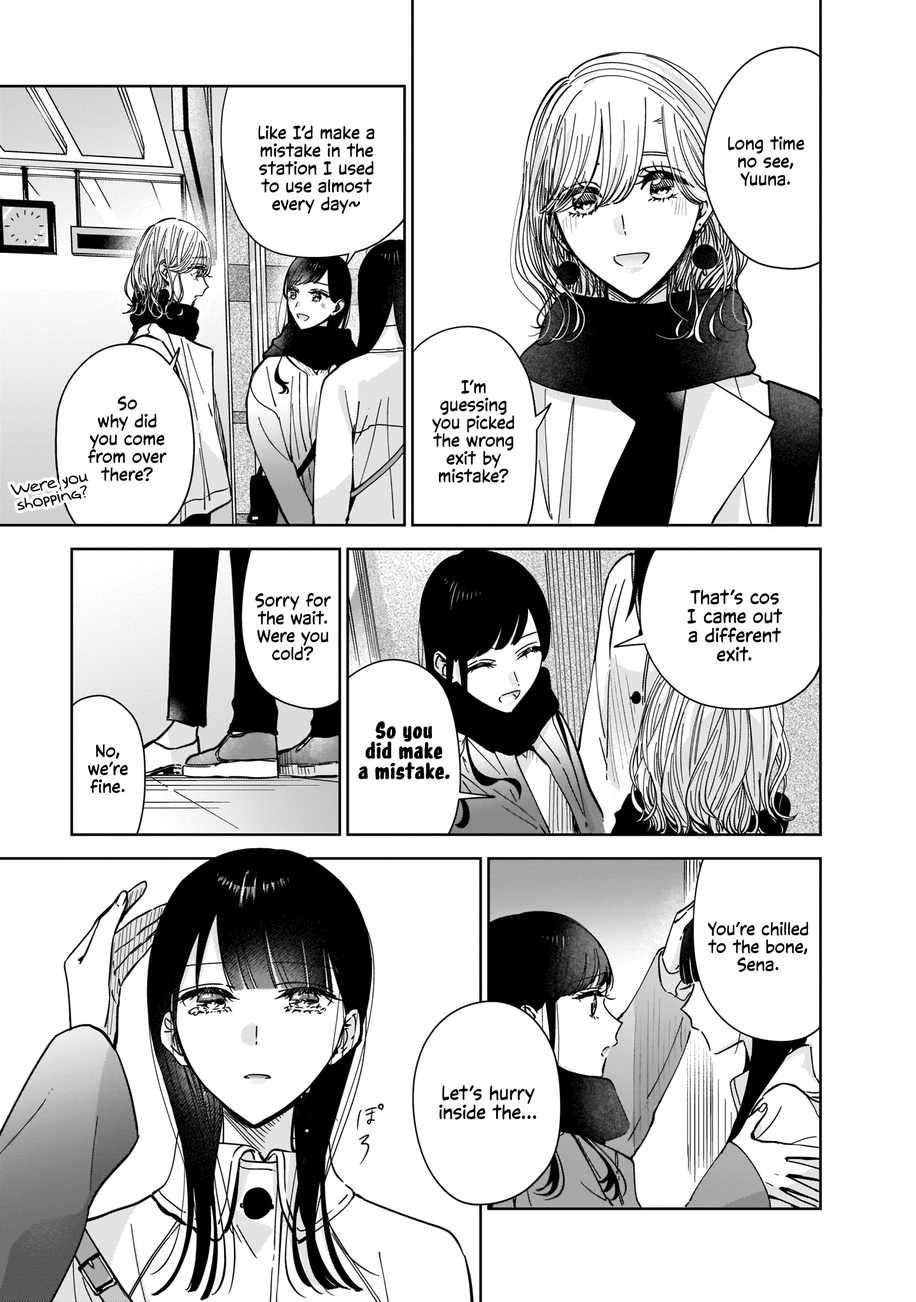
<style>
.page{position:relative;width:916px;height:1302px;background:#ffffff}
.page>*{position:absolute;margin:0}
.t1{font:17.8px "CCVictorySpeechLower-Regular";color:#000000}
.t2{font:15.3px "Augie";color:#000000}
.t3{font:19.1px "CCVictorySpeechLower-Regular";color:#000000}
.t4{font:20.3px "CCTallTales-Heavy";color:#000000;font-weight:bold}
</style>
<div class="page">
<p class="t1" style="left:258px;top:125px;width:117px;height:89px;text-align:center">Like I’d make a<br>mistake in the<br>station I used<br>to use almost<br>every day~</p>
<p class="t1" style="left:727px;top:136px;width:77px;height:50px;text-align:center">Long time<br>no see,<br>Yuuna.</p>
<p class="t1" style="left:432px;top:380px;width:82px;height:103px;text-align:center">I’m<br>guessing<br>you picked<br>the wrong<br>exit by<br>mistake?</p>
<p class="t1" style="left:88px;top:396px;width:79px;height:85px;text-align:center">So<br>why did<br>you come<br>from over<br>there?</p>
<p class="t2" style="left:10px;top:474px;width:78px;height:37px;text-align:center;rotate:-11deg">Were you<br>shopping?</p>
<p class="t1" style="left:255px;top:593px;width:76px;height:68px;text-align:center">Sorry for<br>the wait.<br>Were you<br>cold?</p>
<p class="t3" style="left:687px;top:589px;width:95px;height:73px;text-align:center">That’s cos<br>I came out<br>a different<br>exit.</p>
<p class="t4" style="left:358px;top:721px;width:92px;height:59px;text-align:center">So you<br>did make<br>a mistake.</p>
<p class="t1" style="left:88px;top:744px;width:40px;height:50px;text-align:center">No,<br>we’re<br>fine.</p>
<p class="t1" style="left:708px;top:921px;width:100px;height:51px;text-align:center">You’re chilled<br>to the bone,<br>Sena.</p>
<p class="t3" style="left:439px;top:1085px;width:97px;height:35px;text-align:center">Let’s hurry<br>inside the...</p>
</div>
